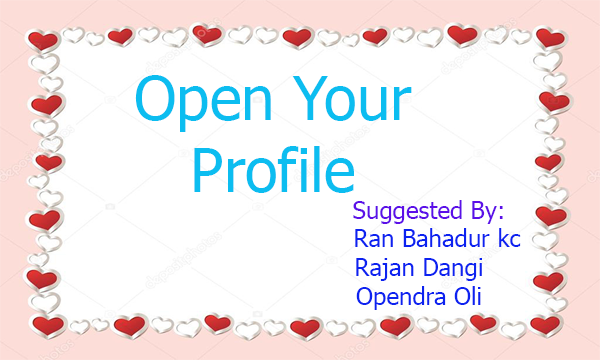
<style>
.page{position:relative;width:600px;height:360px;background:#ffffff}
.page>*{position:absolute;margin:0}
.t1{font:60px "Tahoma";color:#0cbdf0}
.t2{font:60px "Tahoma";color:#f00c1c}
.t3{font:24px "Tahoma";color:#5c0fe8}
.t4{font:24px "Tahoma";color:#8dcbc3}
.t5{font:24px "Tahoma";color:#0c22f0}
.t6{font:24px "Tahoma";color:#f00c1c}
</style>
<div class="page">
<p class="t1" style="left:135px;top:75px;width:277px;height:118px;text-align:center"><span class="t2">   </span>Open Your<br>   Profile</p>
<p class="t3" style="left:353px;top:200px;width:150px;height:24px"><span class="t4"><br>    </span>Suggested By:</p>
<p class="t5" style="left:355px;top:228px;width:166px;height:82px;text-align:center"><span class="t6">              </span>Ran Bahadur kc<br>             Rajan Dangi<br>             Opendra Oli</p>
</div>
